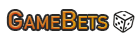
<style>
.page{position:relative;width:140px;height:40px;background:#ffffff}
.page>*{position:absolute;margin:0}
.t1{font:26px "Bahnschrift";font-variant:small-caps}
</style>
<div class="page">
<p class="t1" style="left:8px;top:11px;width:100px;height:19px">GameBets</p>
</div>
